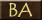
<style>
.page{position:relative;width:42px;height:20px}
.page>*{position:absolute;margin:0}
.t1{font:18.7px "TempusSansITC";color:#e2d180;font-weight:bold}
</style>
<div class="page">
<p class="t1" style="left:9px;top:2px;width:23px;height:15px">BA</p>
</div>
